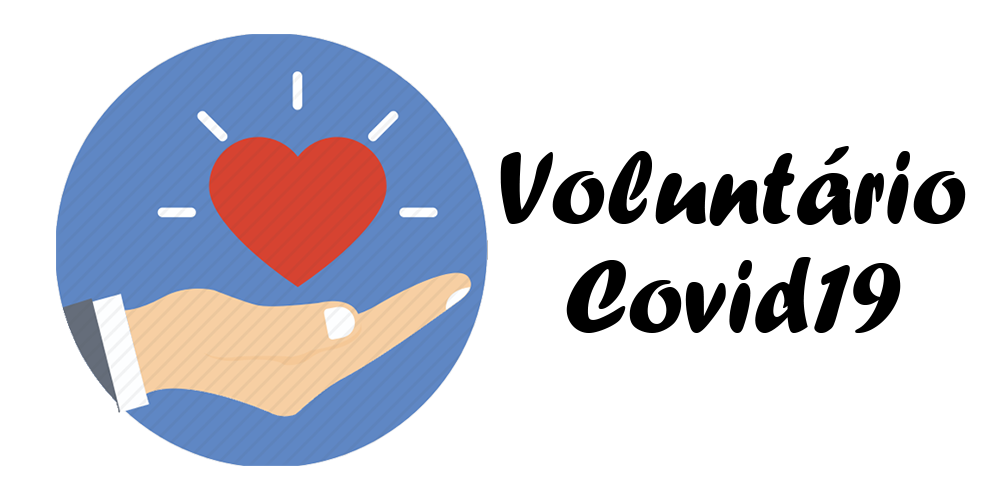
<style>
.page{position:relative;width:1000px;height:500px;background:#ffffff}
.page>*{position:absolute;margin:0}
.t1{font:107.8px/109.3px "ForteMT";color:#000000;scale:0.95 1}
</style>
<div class="page">
<p class="t1" style="left:500px;top:146px;width:466px;height:187px;text-align:center">Voluntário<br>Covid19</p>
</div>
